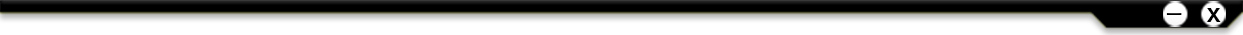
<style>
.page{position:relative;width:1243px;height:35px;background:#ffffff}
.page>*{position:absolute;margin:0}
.t1{font:28px "SinhalaSangamMN"}
.t2{font:28px "SukhumvitSet-Bold";color:#000000}
</style>
<div class="page">
<p class="t1" style="left:1166px;top:13px;width:16px;height:2px">_</p>
<p class="t2" style="left:1206px;top:8px;width:15px;height:14px">x</p>
</div>
